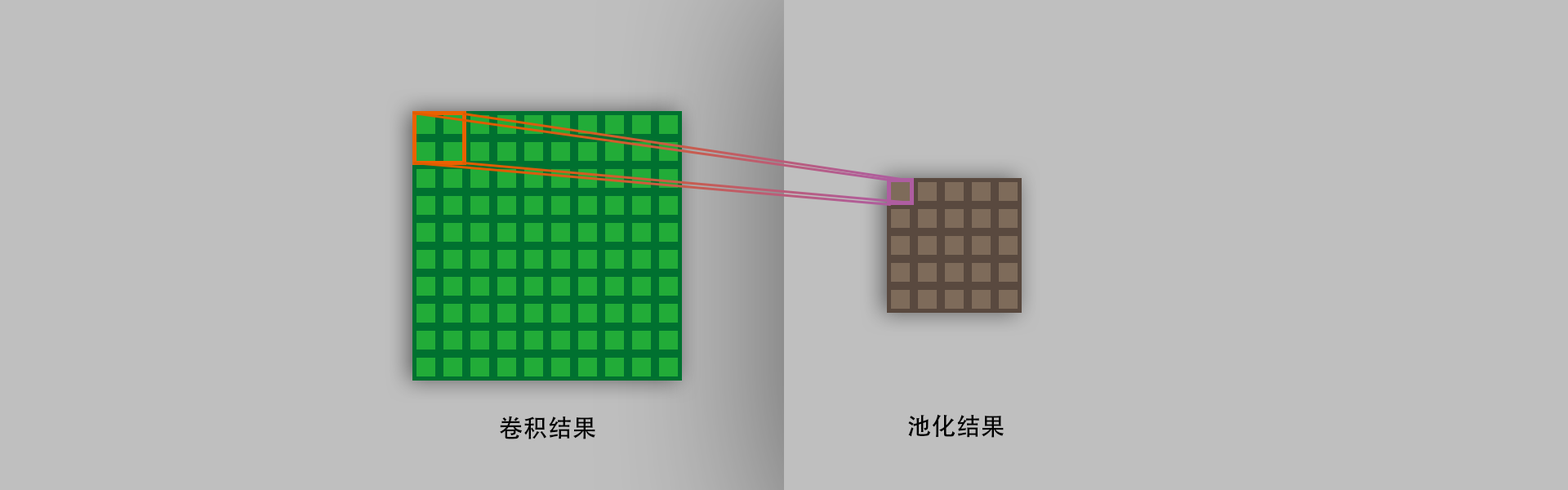
<style>
.page{position:relative;width:1568px;height:490px;background:#bfbfbf}
.page>*{position:absolute;margin:0}
.t1{font:24.5px "AdobeHeitiStd-Regular";color:#000000}
</style>
<div class="page">
<p class="t1" style="left:500px;top:416px;width:95px;height:23px">卷积结果</p>
<p class="t1" style="left:908px;top:414px;width:96px;height:24px">池化结果</p>
</div>
